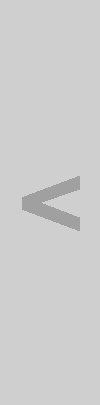
<style>
.page{position:relative;width:100px;height:405px;background:#cfcfcf}
.page>*{position:absolute;margin:0}
.t1{font:100px "Helvetica-Bold";color:#a0a0a0}
</style>
<div class="page">
<p class="t1" style="left:22px;top:176px;width:58px;height:55px">&lt;</p>
</div>
